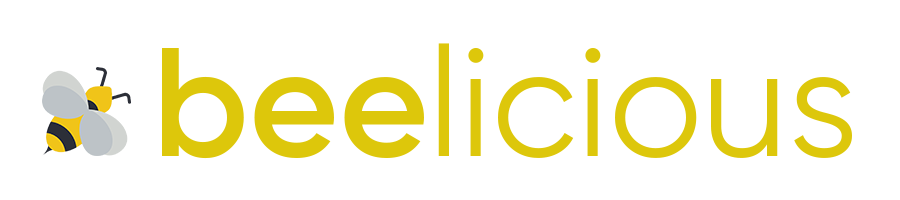
<style>
.page{position:relative;width:900px;height:200px;background:#ffffff}
.page>*{position:absolute;margin:0}
.t1{font:154.2px "Gilroy-Regular";color:#ddc70b}
.t2{font:154.2px "Gilroy-Semibold";color:#ddc70b}
</style>
<div class="page">
<p class="t1" style="left:162px;top:43px;width:690px;height:116px"><span class="t2">bee</span>licious</p>
</div>
